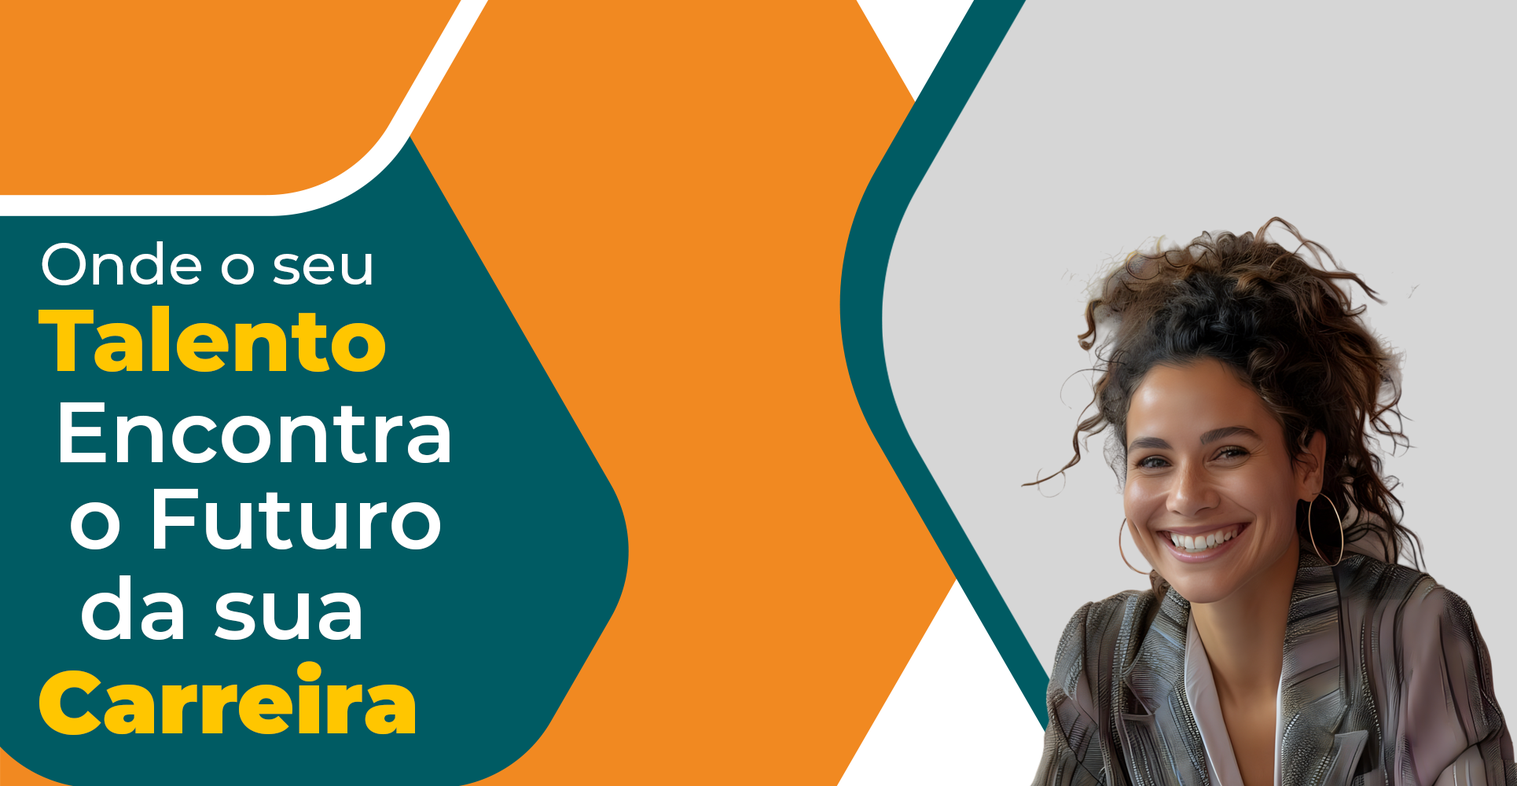
<style>
.page{position:relative;width:1517px;height:786px;background:#f18921}
.page>*{position:absolute;margin:0}
.t1{font:58.4px "Montserrat-Medium";color:#ffffff}
.t2{font:87.6px "Montserrat-ExtraBold";color:#ffc600}
.t3{font:85.7px "Montserrat-SemiBold";color:#ffffff}
.t4{font:87.6px "Montserrat-Black";color:#ffc600}
</style>
<div class="page">
<p class="t1" style="left:42px;top:241px;width:330px;height:44px">Onde o seu</p>
<p class="t2" style="left:39px;top:306px;width:346px;height:67px">Talento</p>
<p class="t3" style="left:61px;top:402px;width:389px;height:61px">Encontra</p>
<p class="t3" style="left:71px;top:488px;width:369px;height:61px">o Futuro</p>
<p class="t3" style="left:82px;top:575px;width:279px;height:66px">da sua</p>
<p class="t4" style="left:39px;top:661px;width:376px;height:74px">Carreira</p>
</div>
